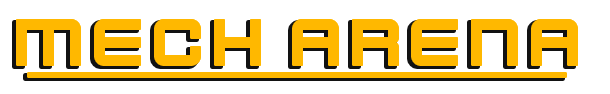
<style>
.page{position:relative;width:610px;height:94px;background:#ffffff}
.page>*{position:absolute;margin:0}
.t1{font:72px "Kenney-Future";color:#ffb800}
</style>
<div class="page">
<p class="t1" style="left:17px;top:20px;width:560px;height:45px">MECH ARENA</p>
</div>
